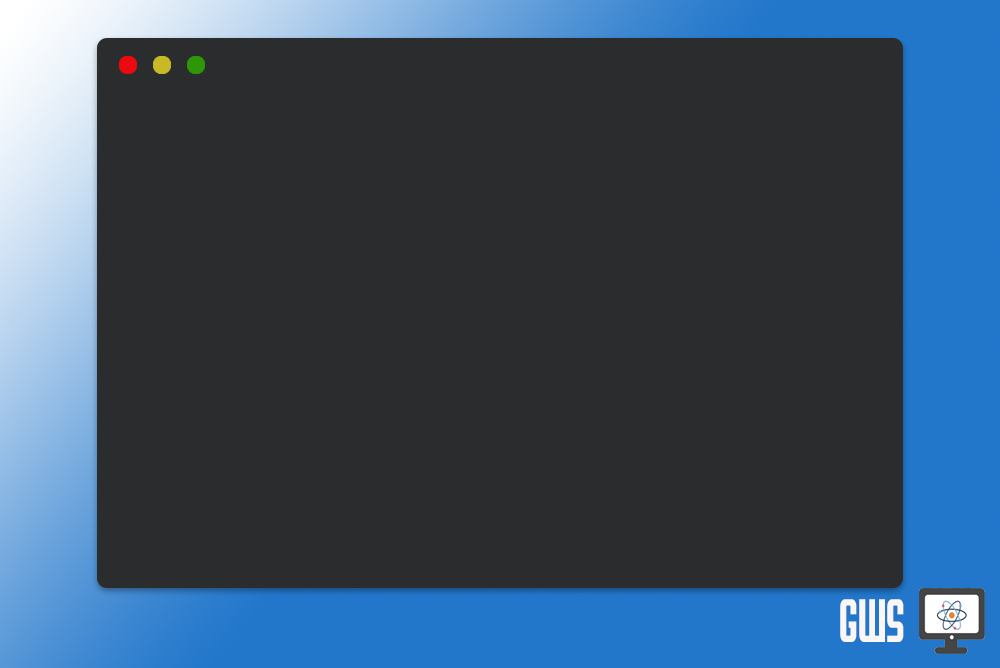
<style>
.page{position:relative;width:1000px;height:668px;background:#2a2c2e}
.page>*{position:absolute;margin:0}
.t1{font:58.3px "Peace&Houston";color:#faf6f6;scale:0.91 1}
</style>
<div class="page">
<p class="t1" style="left:840px;top:599px;width:64px;height:43px">GWS</p>
</div>
